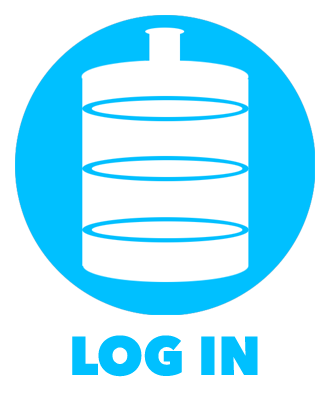
<style>
.page{position:relative;width:330px;height:420px;background:#ffffff}
.page>*{position:absolute;margin:0}
.t1{font:54.2px "AvenirNext-Heavy";color:#00c0ff}
</style>
<div class="page">
<p class="t1" style="left:72px;top:335px;width:186px;height:42px">LOG IN</p>
</div>
